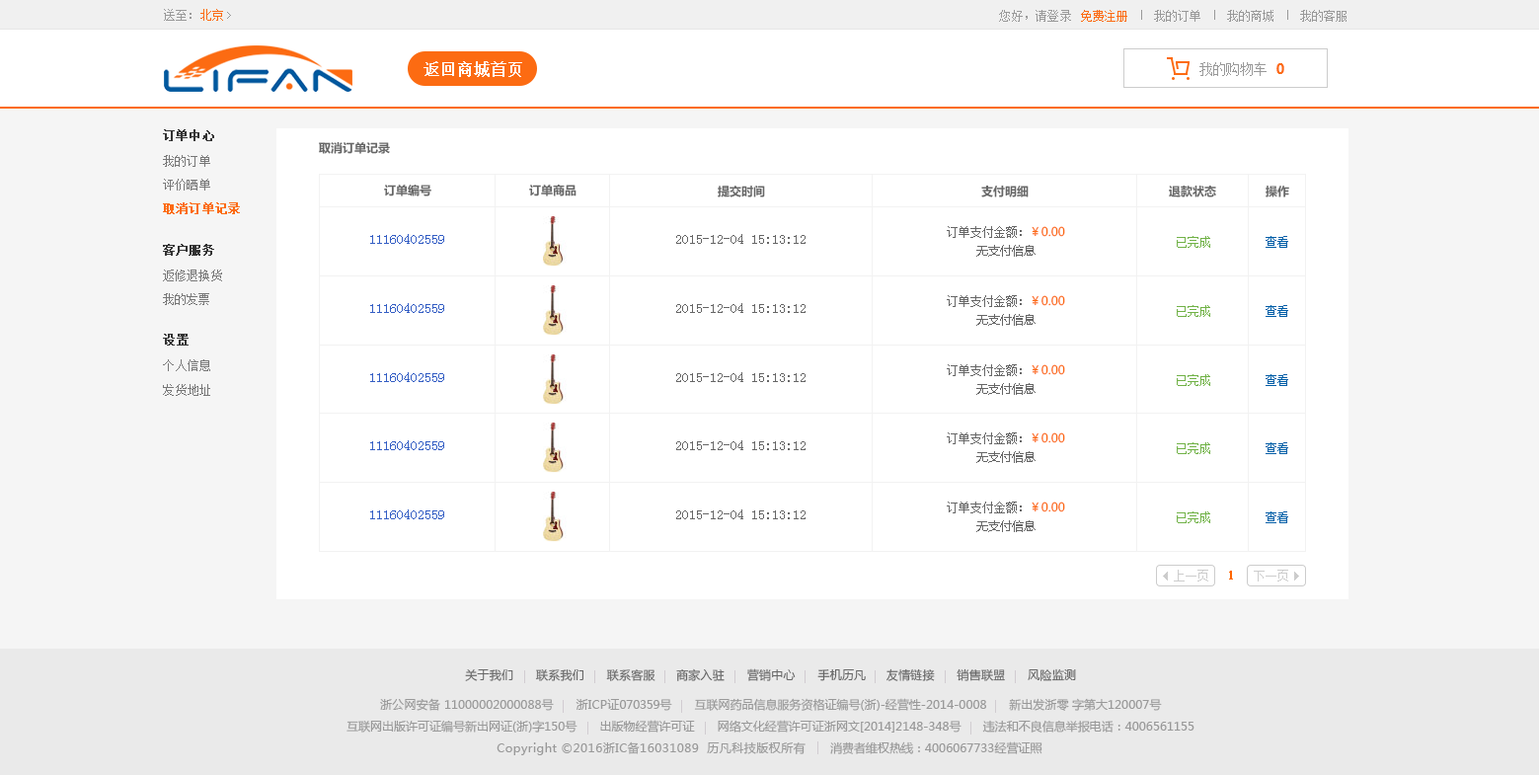
<style>
.page{position:relative;width:1539px;height:775px;background:#ffffff}
.page>*{position:absolute;margin:0}
.t1{font:11.6px "SimSun";letter-spacing:0.02em;color:#999999}
.t2{font:11.6px "SimSun";letter-spacing:0.02em;color:#fc6b12}
.t3{font:12.2px "SimSun";letter-spacing:0.02em;color:#999999}
.t4{font:12.2px "SimSun";letter-spacing:0.02em;color:#fc6b12}
.t5{font:15.8px "SimSun";color:#ffffff;font-weight:bold}
.t6{font:13.8px "SimSun";letter-spacing:-0.06em;color:#999999}
.t7{font:13.8px "MicrosoftYaHei-Bold";letter-spacing:-0.06em;color:#fc6b12}
.t8{font:11.9px "SimSun";color:#333333;font-weight:bold}
.t9{font:11.8px "MicrosoftYaHei-Bold";color:#666666}
.t10{font:11.9px "SimSun";color:#777777}
.t11{font:11.9px "SimSun";color:#fc6b12;font-weight:bold}
.t12{font:13.8px "SimSun";color:#345ec4}
.t13{font:13.8px "SimSun";color:#666666}
.t14{font:11.8px/18.7px "SimSun";color:#666666}
.t15{font:11.8px/18.7px "MicrosoftYaHei";color:#666666}
.t16{font:11.8px "MicrosoftYaHei";color:#fc6b12}
.t17{font:11.8px "SimSun";color:#71b247}
.t18{font:11.8px "SimSun";color:#005ea7}
.t19{font:12px "SimSun";color:#333333;font-weight:bold}
.t20{font:12px "SimSun";color:#777777}
.t21{font:11.8px "SimSun";color:#cccccc}
.t22{font:12.8px "SimSun";color:#ff6600;font-weight:bold}
.t23{font:11.8px "MicrosoftYaHei";letter-spacing:0.02em;color:#666666}
.t24{font:11.8px "MicrosoftYaHei";color:#999999}
.t25{font:11.8px "MicrosoftYaHei";letter-spacing:0.02em;color:#999999}
.t26{font:11.8px "MicrosoftYaHei";letter-spacing:-0.02em;color:#999999}
.t27{font:11.8px "MicrosoftYaHei";letter-spacing:0.04em;color:#999999}
</style>
<div class="page">
<p class="t1" style="left:164px;top:9px;width:59px;height:12px">送至：<span class="t2">北京</span></p>
<p class="t3" style="left:999px;top:10px;width:72px;height:12px">您好，请登录</p>
<p class="t4" style="left:1081px;top:10px;width:46px;height:12px">免费注册</p>
<p class="t3" style="left:1154px;top:10px;width:46px;height:12px">我的订单</p>
<p class="t3" style="left:1227px;top:10px;width:46px;height:12px">我的商城</p>
<p class="t3" style="left:1300px;top:10px;width:46px;height:12px">我的客服</p>
<p class="t5" style="left:423px;top:61px;width:99px;height:16px">返回商城首页</p>
<p class="t6" style="left:1199px;top:62px;width:67px;height:14px">我的购物车</p>
<p class="t7" style="left:1276px;top:63px;width:8px;height:11px">0</p>
<p class="t8" style="left:163px;top:129px;width:51px;height:12px">订单中心</p>
<p class="t9" style="left:319px;top:141px;width:71px;height:13px">取消订单记录</p>
<p class="t10" style="left:163px;top:155px;width:47px;height:12px">我的订单</p>
<p class="t10" style="left:163px;top:179px;width:47px;height:12px">评价晒单</p>
<p class="t9" style="left:384px;top:185px;width:47px;height:11px">订单编号</p>
<p class="t9" style="left:529px;top:184px;width:47px;height:12px">订单商品</p>
<p class="t9" style="left:718px;top:186px;width:47px;height:11px">提交时间</p>
<p class="t9" style="left:981px;top:185px;width:48px;height:12px">支付明细</p>
<p class="t9" style="left:1169px;top:185px;width:47px;height:12px">退款状态</p>
<p class="t9" style="left:1265px;top:186px;width:24px;height:11px">操作</p>
<p class="t11" style="left:163px;top:202px;width:77px;height:12px">取消订单记录</p>
<p class="t12" style="left:370px;top:234px;width:74px;height:10px">11160402559</p>
<p class="t13" style="left:676px;top:234px;width:129px;height:10px">2015-12-04 15:13:12</p>
<p class="t14" style="left:947px;top:226px;width:88px;height:31px;text-align:center">订单支付金额：         <br><span class="t15">无支付信息</span></p>
<p class="t16" style="left:1032px;top:226px;width:33px;height:11px">￥0.00</p>
<p class="t8" style="left:163px;top:244px;width:51px;height:12px">客户服务</p>
<p class="t17" style="left:1177px;top:236px;width:33px;height:12px">已完成</p>
<p class="t18" style="left:1265px;top:236px;width:23px;height:12px">查看</p>
<p class="t10" style="left:163px;top:269px;width:59px;height:12px">返修退换货</p>
<p class="t10" style="left:163px;top:293px;width:46px;height:12px">我的发票</p>
<p class="t12" style="left:370px;top:303px;width:74px;height:10px">11160402559</p>
<p class="t13" style="left:676px;top:303px;width:129px;height:10px">2015-12-04 15:13:12</p>
<p class="t14" style="left:947px;top:295px;width:88px;height:31px;text-align:center">订单支付金额：         <br><span class="t15">无支付信息</span></p>
<p class="t16" style="left:1032px;top:295px;width:33px;height:11px">￥0.00</p>
<p class="t17" style="left:1177px;top:305px;width:33px;height:12px">已完成</p>
<p class="t18" style="left:1265px;top:305px;width:23px;height:12px">查看</p>
<p class="t19" style="left:163px;top:334px;width:26px;height:11px">设置</p>
<p class="t20" style="left:163px;top:359px;width:47px;height:12px">个人信息</p>
<p class="t14" style="left:947px;top:364px;width:88px;height:31px;text-align:center">订单支付金额：         <br><span class="t15">无支付信息</span></p>
<p class="t16" style="left:1032px;top:364px;width:33px;height:11px">￥0.00</p>
<p class="t12" style="left:370px;top:372px;width:74px;height:10px">11160402559</p>
<p class="t13" style="left:676px;top:372px;width:129px;height:10px">2015-12-04 15:13:12</p>
<p class="t17" style="left:1177px;top:374px;width:33px;height:12px">已完成</p>
<p class="t18" style="left:1265px;top:374px;width:23px;height:12px">查看</p>
<p class="t20" style="left:163px;top:384px;width:47px;height:12px">发货地址</p>
<p class="t14" style="left:947px;top:432px;width:88px;height:31px;text-align:center">订单支付金额：         <br><span class="t15">无支付信息</span></p>
<p class="t16" style="left:1032px;top:432px;width:33px;height:11px">￥0.00</p>
<p class="t12" style="left:370px;top:440px;width:74px;height:10px">11160402559</p>
<p class="t13" style="left:676px;top:440px;width:129px;height:10px">2015-12-04 15:13:12</p>
<p class="t17" style="left:1177px;top:442px;width:33px;height:12px">已完成</p>
<p class="t18" style="left:1265px;top:442px;width:23px;height:12px">查看</p>
<p class="t12" style="left:370px;top:509px;width:74px;height:10px">11160402559</p>
<p class="t13" style="left:676px;top:509px;width:129px;height:10px">2015-12-04 15:13:12</p>
<p class="t14" style="left:947px;top:501px;width:88px;height:31px;text-align:center">订单支付金额：         <br><span class="t15">无支付信息</span></p>
<p class="t16" style="left:1032px;top:501px;width:33px;height:11px">￥0.00</p>
<p class="t17" style="left:1177px;top:511px;width:33px;height:12px">已完成</p>
<p class="t18" style="left:1265px;top:511px;width:23px;height:12px">查看</p>
<p class="t21" style="left:1174px;top:570px;width:34px;height:11px">上一页</p>
<p class="t21" style="left:1254px;top:570px;width:34px;height:11px">下一页</p>
<p class="t22" style="left:1229px;top:571px;width:4px;height:8px">1</p>
<p class="t23" style="left:465px;top:668px;width:611px;height:13px">关于我们      联系我们      联系客服     商家入驻      营销中心      手机历凡     友情链接      销售联盟      风险监测</p>
<p class="t24" style="left:380px;top:698px;width:782px;height:13px"><span class="t25">浙公网安备 </span>11000002000088<span class="t25">号      浙ICP证</span><span class="t26">070359号     </span>互联网药品信息服务资格证编号(<span class="t25">浙</span>)-经营性-2014-0008      新出发<span class="t25">浙</span>零 字第大120007号</p>
<p class="t24" style="left:346px;top:720px;width:848px;height:12px">互联网出版许可证编号新出网证(<span class="t25">浙</span>)字150号       出版物经营许可证       网络文化经营许可证<span class="t25">浙</span>网文[2014]2148-348号       违法和不良信息举报电话：4006561155</p>
<p class="t27" style="left:497px;top:741px;width:545px;height:14px"><span class="t24"><br><br></span>Copyright ©2016浙IC备16031089  历凡科技版权所有<span class="t24">       消费者维权热线：4006067733经营证照</span></p>
</div>
